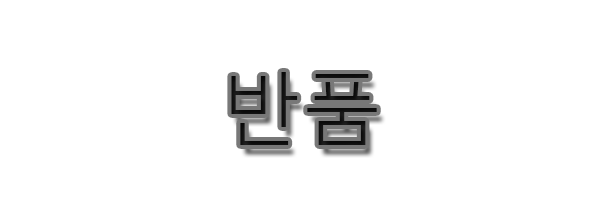
<style>
.page{position:relative;width:600px;height:200px;background:#ffffff}
.page>*{position:absolute;margin:0}
.t1{font:80px "MalgunGothic-Semilight";color:#0f0f0f}
</style>
<div class="page">
<p class="t1" style="left:231px;top:72px;width:146px;height:73px">반품</p>
</div>
